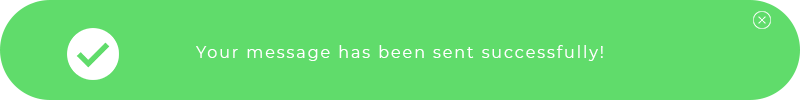
<style>
.page{position:relative;width:800px;height:100px;background:#60dc6b}
.page>*{position:absolute;margin:0}
.t1{font:16px "Montserrat-Regular";letter-spacing:0.12em;color:#ffffff}
</style>
<div class="page">
<p class="t1" style="left:196px;top:45px;width:407px;height:16px">Your message has been sent successfully!</p>
</div>
